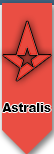
<style>
.page{position:relative;width:54px;height:154px;background:#ea4e43}
.page>*{position:absolute;margin:0}
.t1{font:11.7px "Arial-Black";letter-spacing:-0.01em;color:#000000}
</style>
<div class="page">
<p class="t1" style="left:2px;top:103px;width:49px;height:9px">Astralis</p>
</div>
